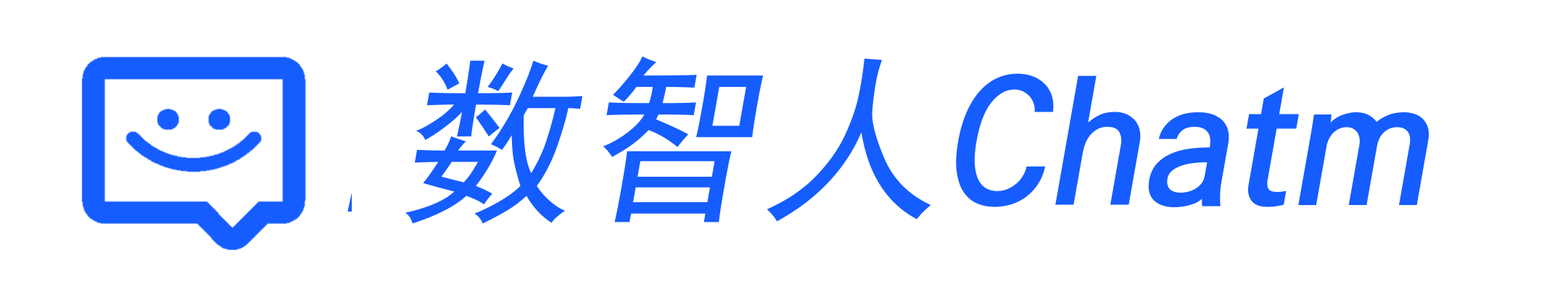
<style>
.page{position:relative;width:1568px;height:284px;background:#ffffff}
.page>*{position:absolute;margin:0}
.t1{font:181.3px "LGDisplay-Regular";color:#165dff;font-style:italic}
.t2{font:181.3px "SimHei";color:#165dff;font-style:italic}
</style>
<div class="page">
<p class="t1" style="left:405px;top:56px;width:1024px;height:168px"><span class="t2">数智人</span>Chatm</p>
</div>
